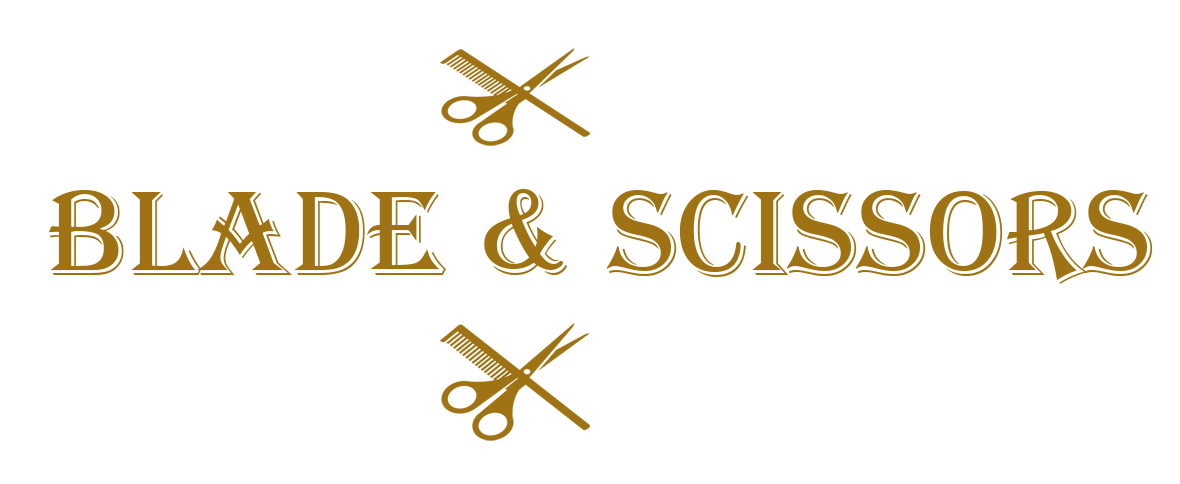
<style>
.page{position:relative;width:1180px;height:484px;background:#ffffff}
.page>*{position:absolute;margin:0}
.t1{font:125px "Algerian";color:#9f7313}
</style>
<div class="page">
<p class="t1" style="left:48px;top:189px;width:1105px;height:95px">blade &amp; scissors</p>
</div>
